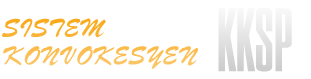
<style>
.page{position:relative;width:311px;height:79px;background:#ffffff}
.page>*{position:absolute;margin:0}
.t1{font:87px "Corporate";color:#e3e3e3}
.t2{font:23px "Brussels"}
</style>
<div class="page">
<p class="t1" style="left:218px;top:7px;width:74px;height:65px">KKSP</p>
<p class="t2" style="left:1px;top:18px;width:198px;height:51px">SISTEM <br>KONVOKESYEN</p>
</div>
